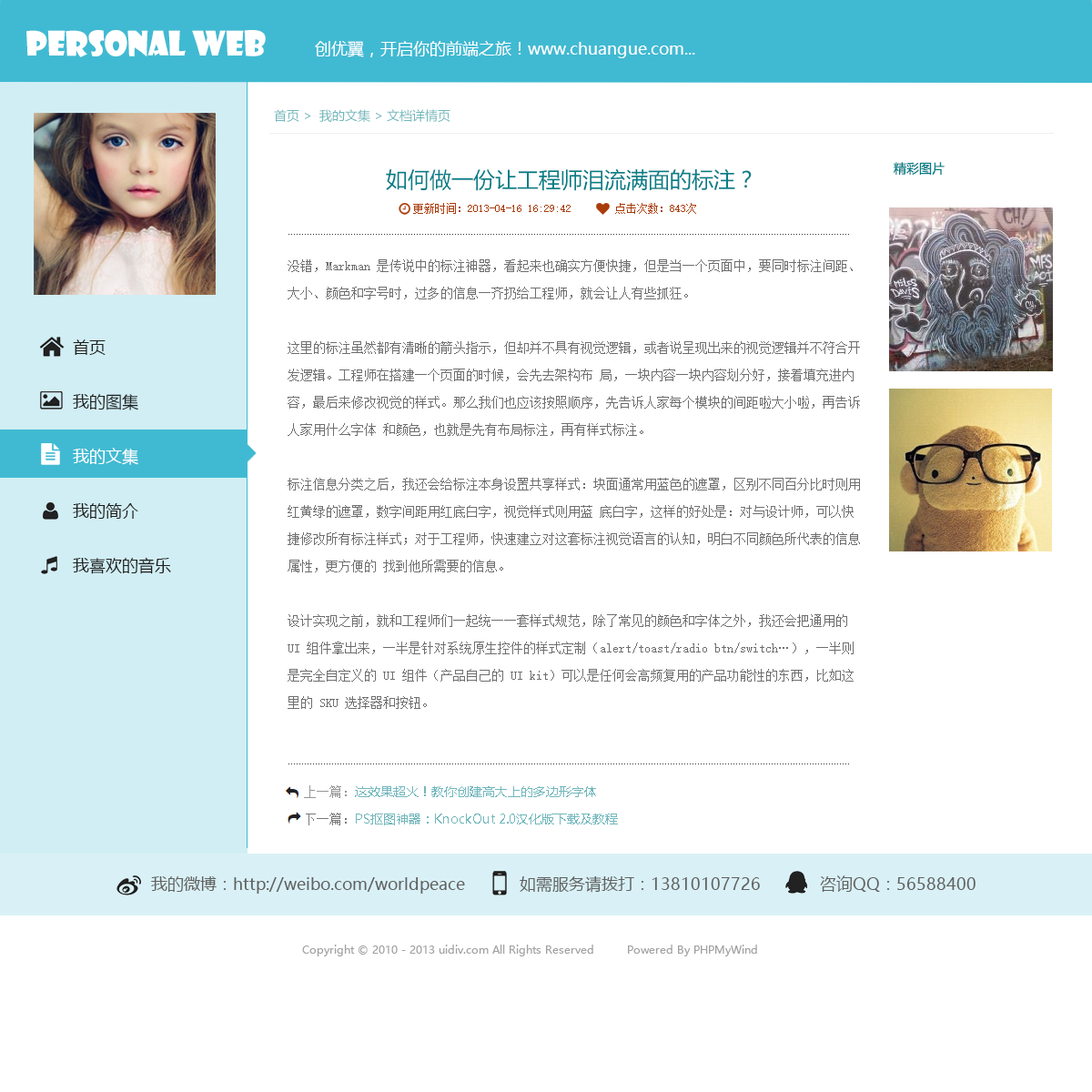
<style>
.page{position:relative;width:1092px;height:1092px;background:#ffffff}
.page>*{position:absolute;margin:0}
.t1{font:32.8px "ShowcardGothic";color:#ffffff}
.t2{font:16.4px "MicrosoftYaHei";color:#ffffff}
.t3{font:12.7px "MicrosoftYaHei";color:#72b7bc}
.t4{font:12.7px "MicrosoftYaHei";color:#007e86}
.t5{font:21.8px "MicrosoftYaHei";color:#007e86}
.t6{font:10.9px "SimSun";color:#a93c0b}
.t7{font:12.7px/27.3px "SimSun";color:#6e6e6e}
.t8{font:16.4px/27.3px "MicrosoftYaHei";color:#1e1e1e}
.t9{font:16.4px/27.3px "MicrosoftYaHei";color:#ffffff}
.t10{font:12.7px/27.3px "MicrosoftYaHei";color:#72b7bc}
.t11{font:12.7px/27.3px "SimSun";color:#959595}
.t12{font:12.7px/27.3px "SimSun";color:#787878}
.t13{font:16.4px "MicrosoftYaHei";color:#616161}
.t14{font:10.9px "MicrosoftYaHei";color:#a2a2a2}
</style>
<div class="page">
<p class="t1" style="left:26px;top:30px;width:240px;height:27px">personal web</p>
<p class="t2" style="left:315px;top:41px;width:380px;height:17px">创优翼，开启你的前端之旅！www.chuangue.com...</p>
<p class="t3" style="left:274px;top:109px;width:176px;height:13px">首页 &gt;  我的文集 &gt; 文档详情页</p>
<p class="t4" style="left:894px;top:162px;width:51px;height:13px">精彩图片</p>
<p class="t5" style="left:386px;top:168px;width:366px;height:23px">如何做一份让工程师泪流满面的标注？</p>
<p class="t6" style="left:413px;top:203px;width:283px;height:11px">更新时间：2013-04-16 16:29:42        点击次数：843次</p>
<p class="t7" style="left:288px;top:259px;width:572px;height:450px">没错，Markman 是传说中的标注神器，看起来也确实方便快捷，但是当一个页面中，要同时标注间距、大小、颜色和字号时，过多的信息一齐扔给工程师，就会让人有些抓狂。<br><br>这里的标注虽然都有清晰的箭头指示，但却并不具有视觉逻辑，或者说呈现出来的视觉逻辑并不符合开发逻辑。工程师在搭建一个页面的时候，会先去架构布 局，一块内容一块内容划分好，接着填充进内容，最后来修改视觉的样式。那么我们也应该按照顺序，先告诉人家每个模块的间距啦大小啦，再告诉人家用什么字体 和颜色，也就是先有布局标注，再有样式标注。<br><br>标注信息分类之后，我还会给标注本身设置共享样式：块面通常用蓝色的遮罩，区别不同百分比时则用红黄绿的遮罩，数字间距用红底白字，视觉样式则用蓝 底白字，这样的好处是：对与设计师，可以快捷修改所有标注样式；对于工程师，快速建立对这套标注视觉语言的认知，明白不同颜色所代表的信息属性，更方便的 找到他所需要的信息。<br><br>设计实现之前，就和工程师们一起统一一套样式规范，除了常见的颜色和字体之外，我还会把通用的 UI 组件拿出来，一半是针对系统原生控件的样式定制（alert/toast/radio btn/switch…），一半则是完全自定义的 UI 组件（产品自己的 UI kit）可以是任何会高频复用的产品功能性的东西，比如这里的 SKU 选择器和按钮。</p>
<p class="t8" style="left:73px;top:339px;width:98px;height:235px">首页<br><br>我的图集<br><br><span class="t9">我的文集<br></span><br>我的简介<br><br>我喜欢的音乐</p>
<p class="t10" style="left:304px;top:785px;width:314px;height:40px"><span class="t11">上一篇：</span>这效果超火！教你创建高大上的多边形字体<br><span class="t12">下一篇：</span>PS抠图神器：KnockOut 2.0汉化版下载及教程</p>
<p class="t13" style="left:151px;top:875px;width:825px;height:19px">我的微博：http://weibo.com/worldpeace            如需服务请拨打：13810107726             咨询QQ：56588400</p>
<p class="t14" style="left:302px;top:945px;width:455px;height:11px">Copyright © 2010 - 2013 uidiv.com All Rights Reserved         Powered By PHPMyWind</p>
</div>
